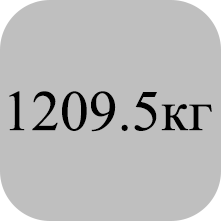
<style>
.page{position:relative;width:221px;height:221px;background:#bfbfbf}
.page>*{position:absolute;margin:0}
.t1{font:57.5px "TimesNewRomanPSMT";color:#000000}
</style>
<div class="page">
<p class="t1" style="left:9px;top:91px;width:203px;height:41px">1209.5кг</p>
</div>
